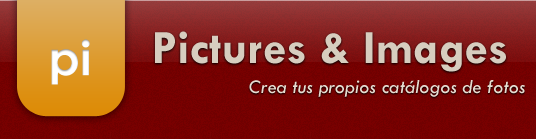
<style>
.page{position:relative;width:536px;height:139px}
.page>*{position:absolute;margin:0}
.t1{font:48px "CenturyGothic-Bold";color:#ffffff}
.t2{font:48px "TwCenMT-Bold";color:#d7cdbf}
.t3{font:20px "TwCenMT-Italic";color:#e7ddd1}
</style>
<div class="page">
<p class="t1" style="left:51px;top:39px;width:39px;height:46px">pi</p>
<p class="t2" style="left:155px;top:31px;width:351px;height:41px">Pictures &amp; Images</p>
<p class="t3" style="left:249px;top:80px;width:276px;height:17px">Crea tus propios catálogos de fotos</p>
</div>
